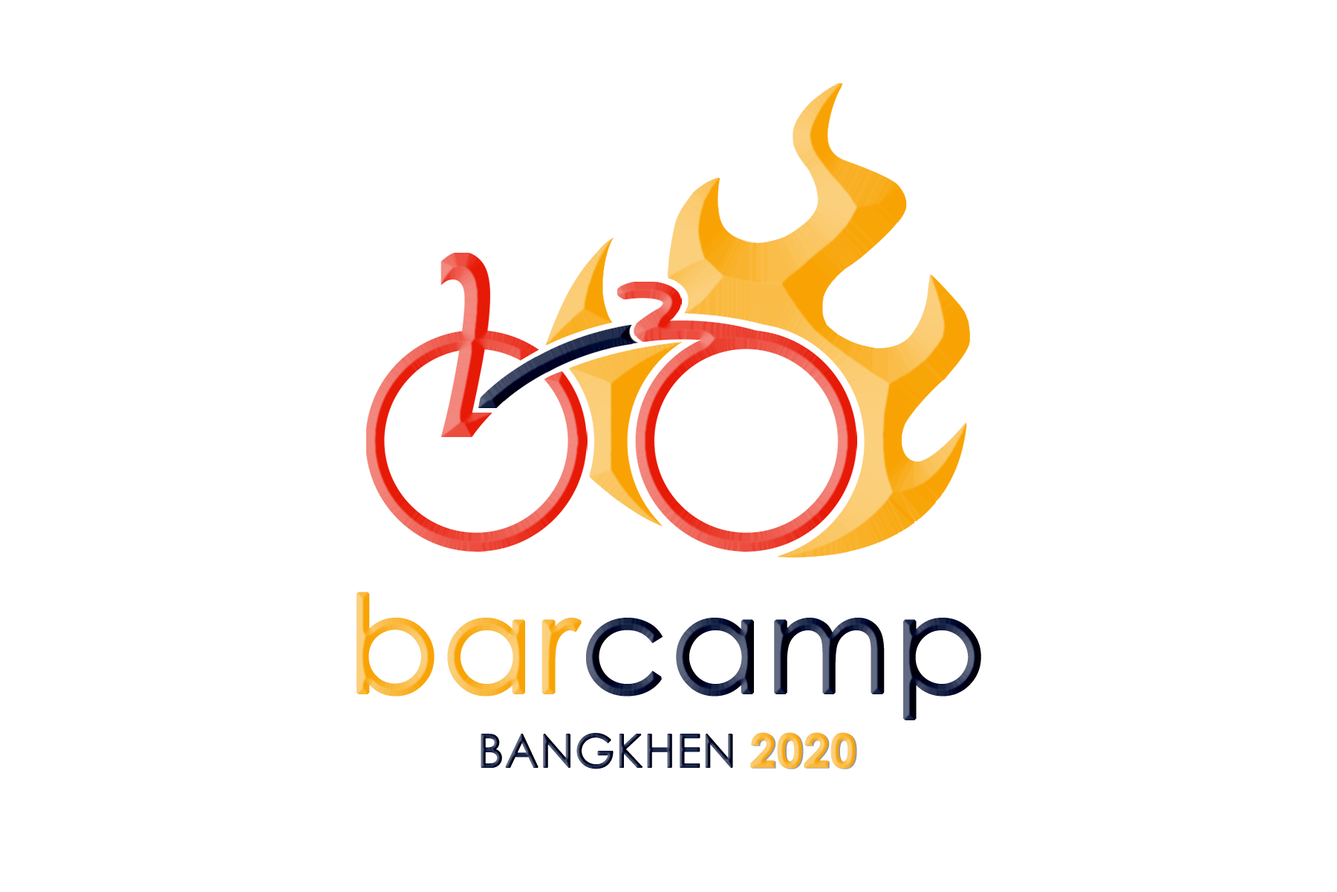
<style>
.page{position:relative;width:1337px;height:892px;background:#ffffff}
.page>*{position:absolute;margin:0}
.t1{font:133.7px "CenturyGothic";font-weight:bold}
.t2{font:45.6px "CenturyGothic";font-weight:bold}
.t3{font:45.6px "CenturyGothic-Bold";font-weight:bold}
</style>
<div class="page">
<p class="t1" style="left:357px;top:591px;width:625px;height:129px">barcamp</p>
<p class="t2" style="left:481px;top:733px;width:252px;height:36px">BANGKHEN</p>
<p class="t3" style="left:750px;top:732px;width:106px;height:36px">2020</p>
<p class="t3" style="left:752px;top:733px;width:105px;height:36px">2020</p>
</div>
